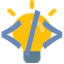
<style>
.page{position:relative;width:64px;height:64px;background:#ffffff}
.page>*{position:absolute;margin:0}
.t1{font:63.1px "BerlinSansFB-Reg";color:#6a8bb9}
</style>
<div class="page">
<p class="t1" style="left:1px;top:10px;width:62px;height:47px">&lt;/&gt;</p>
</div>
